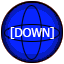
<style>
.page{position:relative;width:64px;height:64px;background:#0825ff}
.page>*{position:absolute;margin:0}
.t1{font:12px "Tahoma";color:#ffffff}
</style>
<div class="page">
<p class="t1" style="left:10px;top:27px;width:44px;height:12px">[DOWN]</p>
</div>
